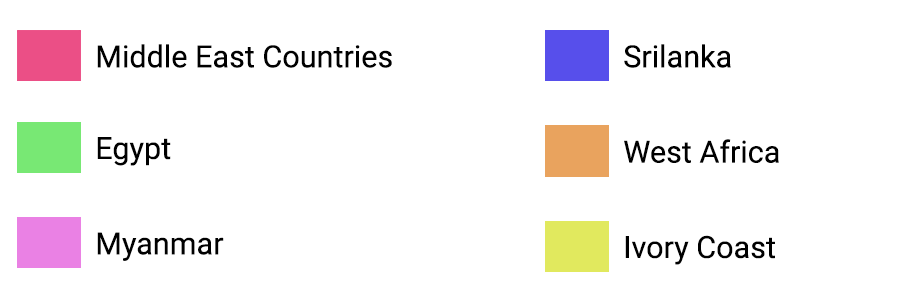
<style>
.page{position:relative;width:900px;height:300px;background:#ffffff}
.page>*{position:absolute;margin:0}
.t1{font:30.6px "Roboto-Regular";color:#000000}
</style>
<div class="page">
<p class="t1" style="left:97px;top:44px;width:295px;height:24px">Middle East Countries</p>
<p class="t1" style="left:624px;top:44px;width:107px;height:24px">Srilanka</p>
<p class="t1" style="left:97px;top:137px;width:74px;height:29px">Egypt</p>
<p class="t1" style="left:624px;top:139px;width:155px;height:24px">West Africa</p>
<p class="t1" style="left:97px;top:232px;width:127px;height:29px">Myanmar</p>
<p class="t1" style="left:625px;top:235px;width:150px;height:30px">Ivory Coast</p>
</div>
